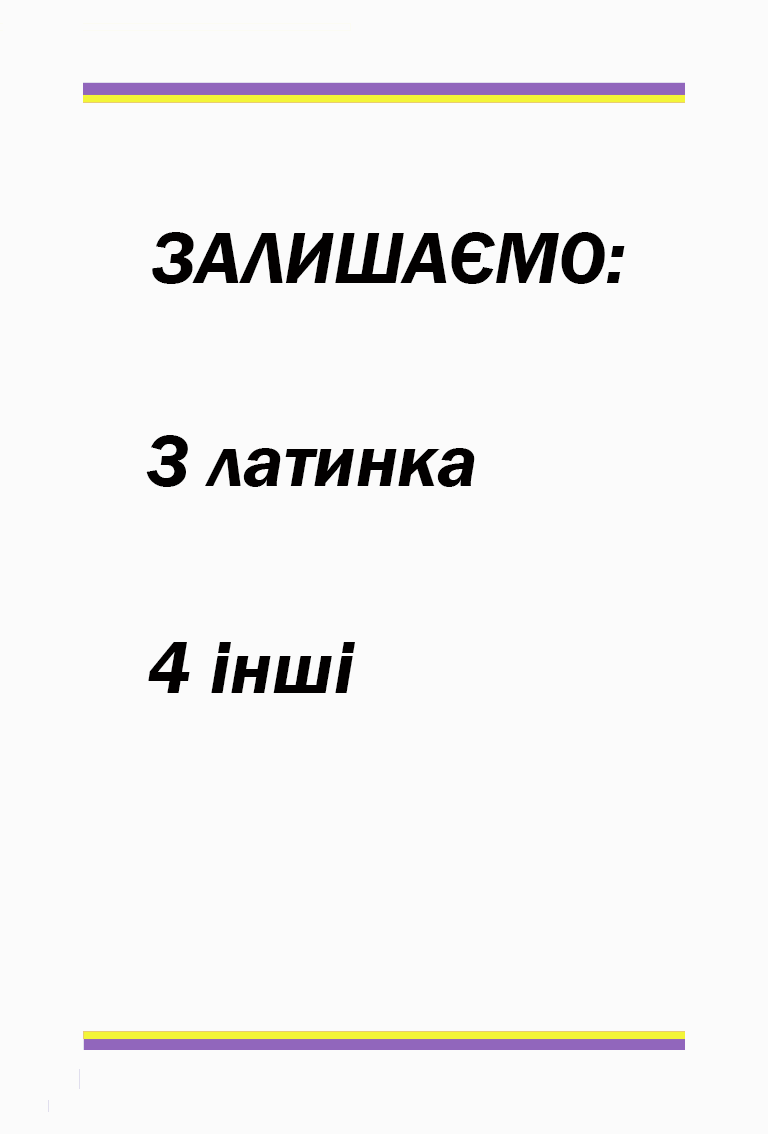
<style>
.page{position:relative;width:768px;height:1134px;background:#fbfbfb}
.page>*{position:absolute;margin:0}
.t1{font:75px "FranklinGothic-DemiItalic";color:#020000}
</style>
<div class="page">
<p class="t1" style="left:152px;top:232px;width:473px;height:52px">ЗАЛИШАЄМО:</p>
<p class="t1" style="left:146px;top:435px;width:329px;height:52px">3 латинка</p>
<p class="t1" style="left:148px;top:642px;width:207px;height:51px">4 інші</p>
</div>
